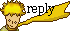
<style>
.page{position:relative;width:70px;height:31px;background:#ffffff}
.page>*{position:absolute;margin:0}
.t1{font:12px "Georgia";color:#000000}
</style>
<div class="page">
<p class="t1" style="left:27px;top:3px;width:28px;height:13px">reply</p>
</div>
